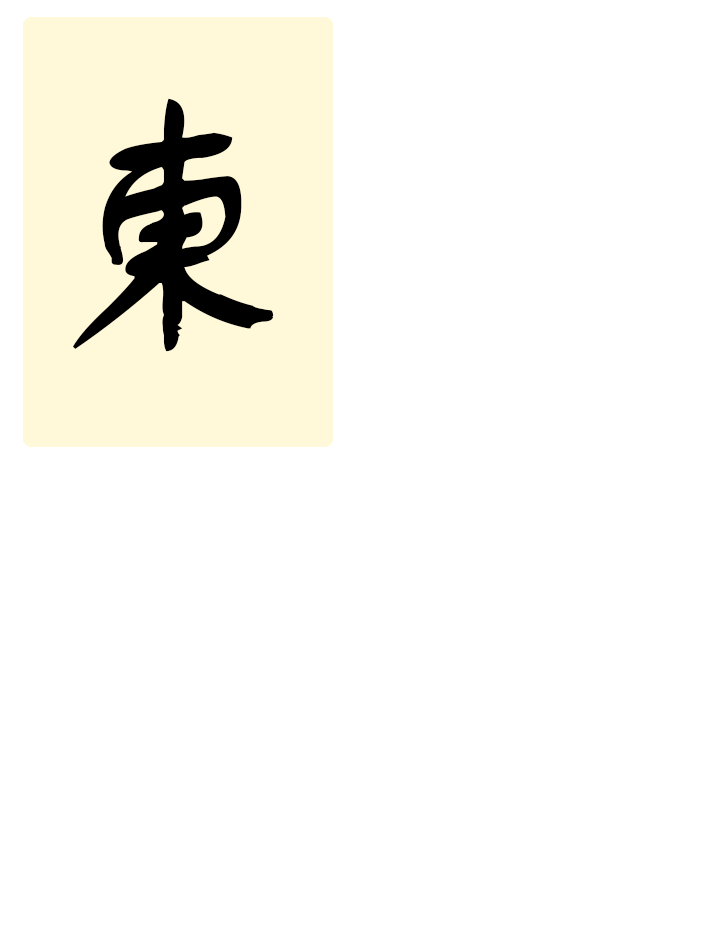
<style>
.page{position:relative;width:708px;height:944px;background:#ffffff}
.page>*{position:absolute;margin:0}
.t1{font:290.9px "FZSTK--GBK1-0";color:#000000}
</style>
<div class="page">
<p class="t1" style="left:73px;top:98px;width:201px;height:254px">東</p>
</div>
